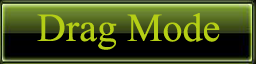
<style>
.page{position:relative;width:256px;height:64px}
.page>*{position:absolute;margin:0}
.t1{font:40px "TimesNewRomanPSMT";color:#b4ce15}
</style>
<div class="page">
<p class="t1" style="left:37px;top:13px;width:183px;height:37px">Drag Mode</p>
</div>
